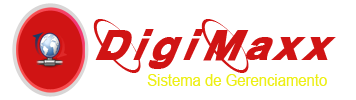
<style>
.page{position:relative;width:356px;height:100px;background:#ffffff}
.page>*{position:absolute;margin:0}
.t1{font:16.9px/25.4px "ArialMT";color:#ecef15;scale:0.88 1}
.t2{font:49.4px "13Misa";letter-spacing:0.05em;color:#d01414;scale:0.88 1}
</style>
<div class="page">
<p class="t1" style="left:93px;top:19px;width:243px;height:67px"><span class="t2">DigiMaxx <br>              </span>Sistema de Gerenciamento</p>
</div>
